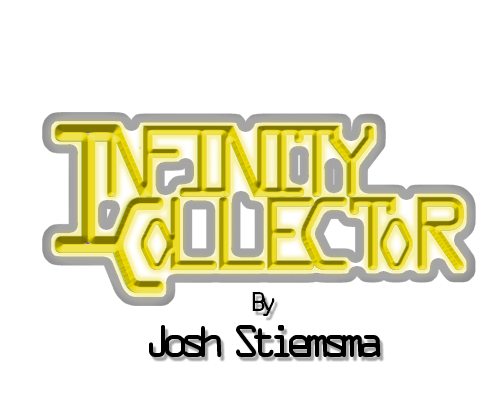
<style>
.page{position:relative;width:500px;height:400px;background:#ffffff}
.page>*{position:absolute;margin:0}
.t1{font:91.2px "OCRAStd";letter-spacing:-0.32em}
.t2{font:165.1px "OCRAStd";letter-spacing:-0.295em;scale:0.82 1}
.t3{font:91.2px "OCRAStd";letter-spacing:-0.26em}
.t4{font:91.2px "OCRAStd";letter-spacing:-0.3em}
.t5{font:91.2px "OCRAStd";letter-spacing:-0.33em}
.t6{font:91.2px "OCRAStd";letter-spacing:-0.34em}
.t7{font:91.2px "OCRAStd";letter-spacing:-0.18em}
.t8{font:94px "OCRAStd";letter-spacing:-0.2em}
.t9{font:123.4px "OCRAStd";letter-spacing:-0.41em;scale:0.82 1}
.t10{font:66.6px "OCRAStd";letter-spacing:-0.315em}
.t11{font:94px "OCRAStd";letter-spacing:-0.36em}
.t12{font:66.6px "OCRAStd";letter-spacing:-0.2em}
.t13{font:41.7px/21px "OCRAStd";letter-spacing:-0.295em;color:#000000}
.t14{font:24px/21px "OCRAStd";letter-spacing:-0.295em;color:#000000}
</style>
<div class="page">
<p class="t1" style="left:54px;top:125px;width:319px;height:128px"><span class="t2">I</span>NF<span class="t3">I</span><span class="t4">N</span><span class="t5">I</span><span class="t6">T</span><span class="t7">Y</span></p>
<p class="t8" style="left:112px;top:197px;width:352px;height:96px"><span class="t9">C</span><span class="t10">O</span>LL<span class="t11">E</span>C<span class="t11">T</span><span class="t12">O</span>R</p>
<p class="t13" style="left:149px;top:292px;width:232px;height:65px;text-align:center"><span class="t14">By<br></span>Josh Stiemsma</p>
</div>
